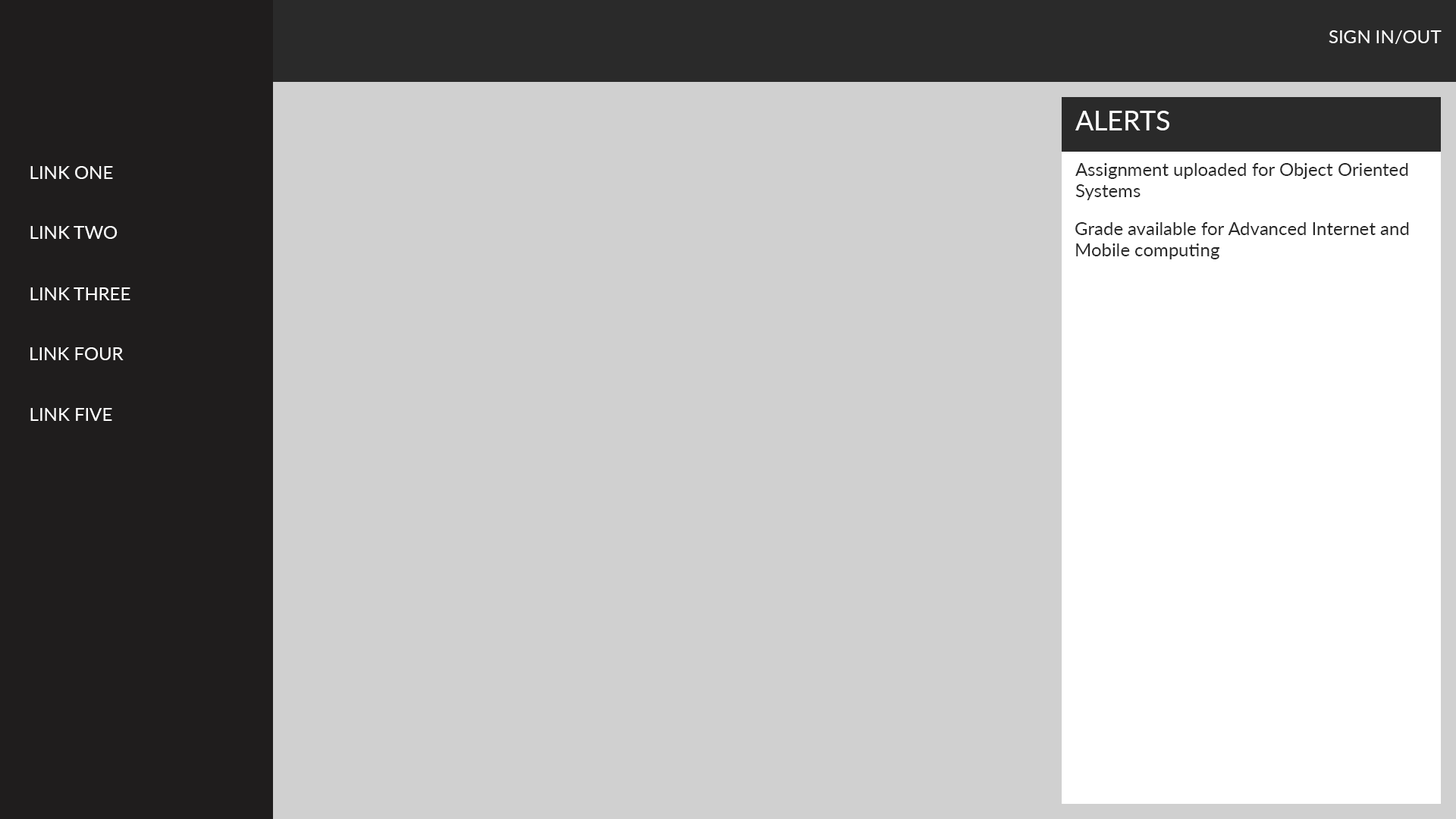
<style>
.page{position:relative;width:1456px;height:819px;background:#d0d0d0}
.page>*{position:absolute;margin:0}
.t1{font:18.2px "Lato-Regular";color:#ffffff}
.t2{font:27.3px "Lato-Regular";color:#ffffff}
.t3{font:18.2px "Lato-Regular";color:#2a2a2a}
</style>
<div class="page">
<p class="t1" style="left:1329px;top:30px;width:113px;height:14px">SIGN IN/OUT</p>
<p class="t2" style="left:1075px;top:111px;width:94px;height:19px">ALERTS</p>
<p class="t1" style="left:30px;top:166px;width:83px;height:13px">LINK ONE</p>
<p class="t3" style="left:1075px;top:163px;width:333px;height:37px">Assignment uploaded for Object Oriented <br>Systems</p>
<p class="t1" style="left:30px;top:226px;width:88px;height:13px">LINK TWO</p>
<p class="t3" style="left:1075px;top:222px;width:334px;height:37px">Grade available for Advanced Internet and<br>Mobile computing</p>
<p class="t1" style="left:30px;top:287px;width:100px;height:13px">LINK THREE</p>
<p class="t1" style="left:30px;top:347px;width:94px;height:13px">LINK FOUR</p>
<p class="t1" style="left:30px;top:408px;width:82px;height:13px">LINK FIVE</p>
</div>
